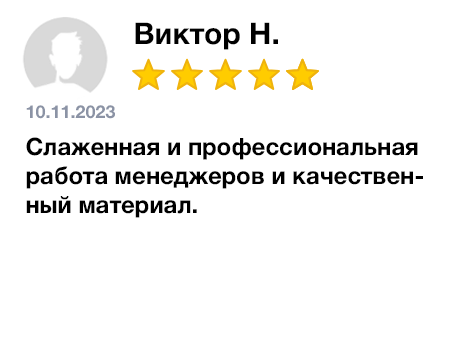
<style>
.page{position:relative;width:450px;height:350px;background:#ffffff}
.page>*{position:absolute;margin:0}
.t1{font:30px "HelveticaNeue-Bold";color:#000000}
.t2{font:18px "HelveticaNeue-Bold";color:#8b93a5}
.t3{font:24px "HelveticaNeue-Bold";color:#000000}
</style>
<div class="page">
<p class="t1" style="left:135px;top:22px;width:143px;height:28px">Виктор Н.</p>
<p class="t2" style="left:26px;top:105px;width:89px;height:14px">10.11.2023</p>
<p class="t3" style="left:26px;top:137px;width:397px;height:81px">Слаженная и профессиональная работа менеджеров и качественный материал.</p>
</div>
